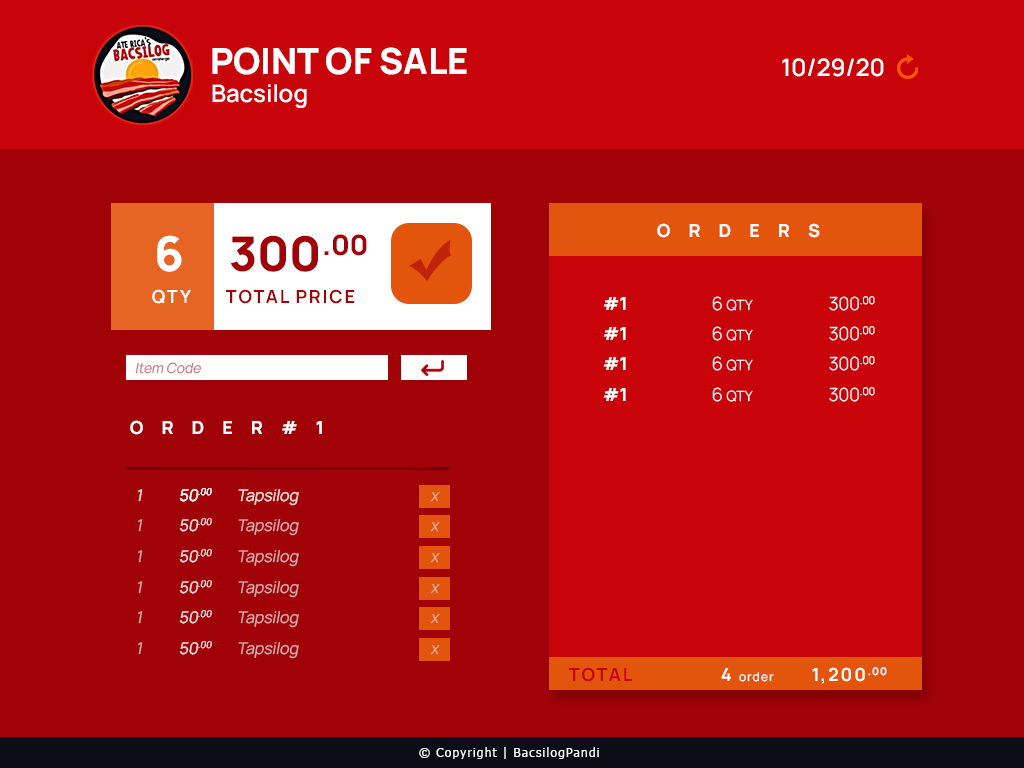
<style>
.page{position:relative;width:1024px;height:768px;background:#a00208}
.page>*{position:absolute;margin:0}
.t1{font:36px "Manrope-ExtraBold";color:#fefefe}
.t2{font:24px "Manrope-SemiBold";color:#fefefe}
.t3{font:18px "Manrope-ExtraBold";letter-spacing:1em;color:#fefefe;text-transform:uppercase}
.t4{font:48px "Manrope-ExtraBold";color:#ffffff;text-transform:uppercase}
.t5{font:48px "Manrope-ExtraBold";color:#a00208;text-transform:uppercase}
.t6{font:18px "Manrope-Bold";letter-spacing:0.1em;color:#ffffff;text-transform:uppercase}
.t7{font:18px "Manrope-Bold";letter-spacing:0.1em;color:#a00208;text-transform:uppercase}
.t8{font:18px "Manrope-ExtraBold";color:#fefefe;text-transform:uppercase}
.t9{font:14px "Manrope-Light";color:#fefefe;text-transform:uppercase}
.t10{font:18px "Manrope-Light";color:#fefefe;text-transform:uppercase}
.t11{font:14px "Manrope-Regular";color:#c67577;font-style:italic}
.t12{font:16px "Manrope-Regular";color:#eddbdc;font-style:italic}
.t13{font:16px "Manrope-Regular";color:#ffffff;font-style:italic}
.t14{font:12px "Manrope-Regular";font-style:italic}
.t15{font:16px "Manrope-Regular";color:#d7acad;font-style:italic}
.t16{font:18px "Manrope-Bold";letter-spacing:0.1em;color:#c8030a;text-transform:uppercase}
.t17{font:12px "Manrope-Regular";letter-spacing:0.1em;color:#ffffff}
.t18{font:18px "Manrope-Bold";letter-spacing:0.1em;color:#ffffff}
.t19{font:12px "Tahoma";letter-spacing:0.1em;color:#ffffff}
</style>
<div class="page">
<p class="t1" style="left:212px;top:47px;width:255px;height:28px">POINT OF SALE</p>
<p class="t2" style="left:782px;top:58px;width:102px;height:19px">10/29/20</p>
<p class="t2" style="left:212px;top:84px;width:95px;height:24px">Bacsilog</p>
<p class="t3" style="left:657px;top:223px;width:163px;height:15px">Orders</p>
<p class="t4" style="left:157px;top:235px;width:25px;height:37px">6</p>
<p class="t5" style="left:231px;top:234px;width:136px;height:38px">300.00</p>
<p class="t6" style="left:152px;top:289px;width:39px;height:15px">qty</p>
<p class="t7" style="left:226px;top:289px;width:129px;height:15px">total Price</p>
<p class="t8" style="left:603px;top:297px;width:23px;height:13px">#1</p>
<p class="t9" style="left:712px;top:296px;width:41px;height:15px"><span class="t10">6 </span>qty</p>
<p class="t10" style="left:829px;top:296px;width:46px;height:15px">300.00</p>
<p class="t8" style="left:603px;top:327px;width:23px;height:13px">#1</p>
<p class="t9" style="left:712px;top:326px;width:41px;height:15px"><span class="t10">6 </span>qty</p>
<p class="t10" style="left:829px;top:326px;width:46px;height:15px">300.00</p>
<p class="t11" style="left:135px;top:362px;width:67px;height:12px">Item Code</p>
<p class="t8" style="left:603px;top:357px;width:23px;height:13px">#1</p>
<p class="t9" style="left:712px;top:356px;width:41px;height:15px"><span class="t10">6 </span>qty</p>
<p class="t10" style="left:829px;top:356px;width:46px;height:15px">300.00</p>
<p class="t8" style="left:603px;top:388px;width:23px;height:13px">#1</p>
<p class="t9" style="left:712px;top:387px;width:41px;height:15px"><span class="t10">6 </span>qty</p>
<p class="t10" style="left:829px;top:387px;width:46px;height:15px">300.00</p>
<p class="t3" style="left:130px;top:420px;width:192px;height:15px">Order#1</p>
<p class="t12" style="left:138px;top:489px;width:5px;height:13px">1</p>
<p class="t12" style="left:138px;top:489px;width:5px;height:13px">1</p>
<p class="t13" style="left:179px;top:488px;width:33px;height:14px;opacity:0.54">50.00</p>
<p class="t13" style="left:179px;top:488px;width:33px;height:14px;opacity:0.54">50.00</p>
<p class="t13" style="left:179px;top:488px;width:33px;height:14px;opacity:0.54">50.00</p>
<p class="t13" style="left:179px;top:488px;width:33px;height:14px;opacity:0.54">50.00</p>
<p class="t12" style="left:238px;top:489px;width:61px;height:17px">Tapsilog</p>
<p class="t12" style="left:238px;top:489px;width:61px;height:17px">Tapsilog</p>
<p class="t14" style="left:430px;top:492px;width:10px;height:10px">X</p>
<p class="t14" style="left:430px;top:492px;width:10px;height:10px">X</p>
<p class="t15" style="left:138px;top:519px;width:5px;height:13px">1</p>
<p class="t12" style="left:179px;top:518px;width:33px;height:14px">50.00</p>
<p class="t12" style="left:179px;top:518px;width:33px;height:14px">50.00</p>
<p class="t15" style="left:238px;top:519px;width:61px;height:17px">Tapsilog</p>
<p class="t14" style="left:430px;top:522px;width:10px;height:10px">X</p>
<p class="t15" style="left:138px;top:550px;width:5px;height:13px">1</p>
<p class="t12" style="left:179px;top:549px;width:33px;height:14px">50.00</p>
<p class="t12" style="left:179px;top:549px;width:33px;height:14px">50.00</p>
<p class="t15" style="left:238px;top:550px;width:61px;height:17px">Tapsilog</p>
<p class="t14" style="left:430px;top:553px;width:10px;height:10px">X</p>
<p class="t15" style="left:138px;top:581px;width:5px;height:13px">1</p>
<p class="t12" style="left:179px;top:580px;width:33px;height:14px">50.00</p>
<p class="t12" style="left:179px;top:580px;width:33px;height:14px">50.00</p>
<p class="t15" style="left:238px;top:581px;width:61px;height:17px">Tapsilog</p>
<p class="t14" style="left:430px;top:584px;width:10px;height:10px">X</p>
<p class="t15" style="left:138px;top:611px;width:5px;height:13px">1</p>
<p class="t12" style="left:179px;top:610px;width:33px;height:14px">50.00</p>
<p class="t12" style="left:179px;top:610px;width:33px;height:14px">50.00</p>
<p class="t15" style="left:238px;top:611px;width:61px;height:17px">Tapsilog</p>
<p class="t14" style="left:430px;top:614px;width:10px;height:10px">X</p>
<p class="t12" style="left:179px;top:641px;width:33px;height:14px">50.00</p>
<p class="t12" style="left:179px;top:641px;width:33px;height:14px">50.00</p>
<p class="t15" style="left:138px;top:642px;width:5px;height:13px">1</p>
<p class="t15" style="left:238px;top:642px;width:61px;height:17px">Tapsilog</p>
<p class="t14" style="left:430px;top:645px;width:10px;height:10px">X</p>
<p class="t16" style="left:569px;top:667px;width:63px;height:15px">total</p>
<p class="t17" style="left:721px;top:668px;width:53px;height:14px"><span class="t18">4 </span>order</p>
<p class="t6" style="left:812px;top:667px;width:75px;height:17px">1,200.00</p>
<p class="t19" style="left:419px;top:747px;width:180px;height:12px">© Copyright | BacsilogPandi</p>
</div>
